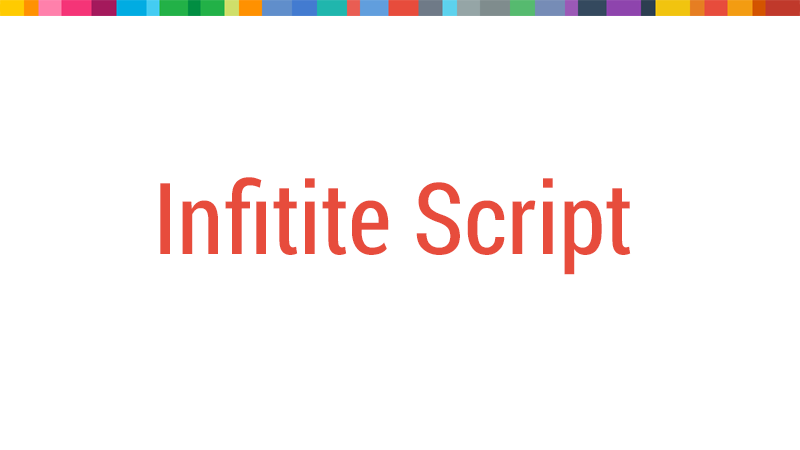
<style>
.page{position:relative;width:800px;height:450px;background:#ffffff}
.page>*{position:absolute;margin:0}
.t1{font:99.5px "RobotoCondensed-Regular";color:#e74c3c}
</style>
<div class="page">
<p class="t1" style="left:160px;top:177px;width:471px;height:98px">Infitite Script</p>
</div>
